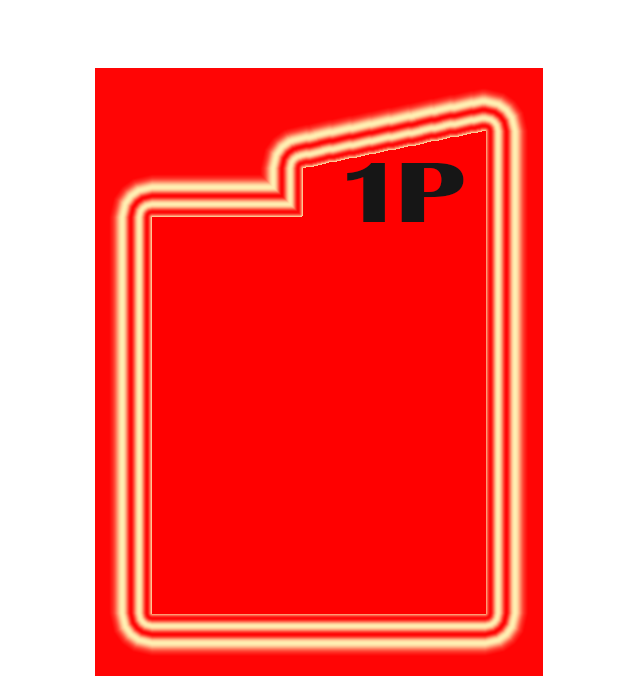
<style>
.page{position:relative;width:637px;height:676px;background:#ffffff}
.page>*{position:absolute;margin:0}
.t1{font:89.4px "BritannicBold";letter-spacing:-0.1em;color:#161616;font-variant:small-caps;scale:1.3 1}
</style>
<div class="page">
<p class="t1" style="left:347px;top:163px;width:117px;height:59px">1P</p>
</div>
